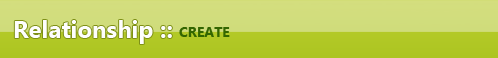
<style>
.page{position:relative;width:498px;height:58px}
.page>*{position:absolute;margin:0}
.t1{font:24px "SegoeUI-Bold";color:#fefefe}
.t2{font:14px "SegoeUI-Bold";color:#336600}
</style>
<div class="page">
<p class="t1" style="left:14px;top:20px;width:158px;height:24px">Relationship ::</p>
<p class="t2" style="left:179px;top:27px;width:51px;height:10px">CREATE</p>
</div>
